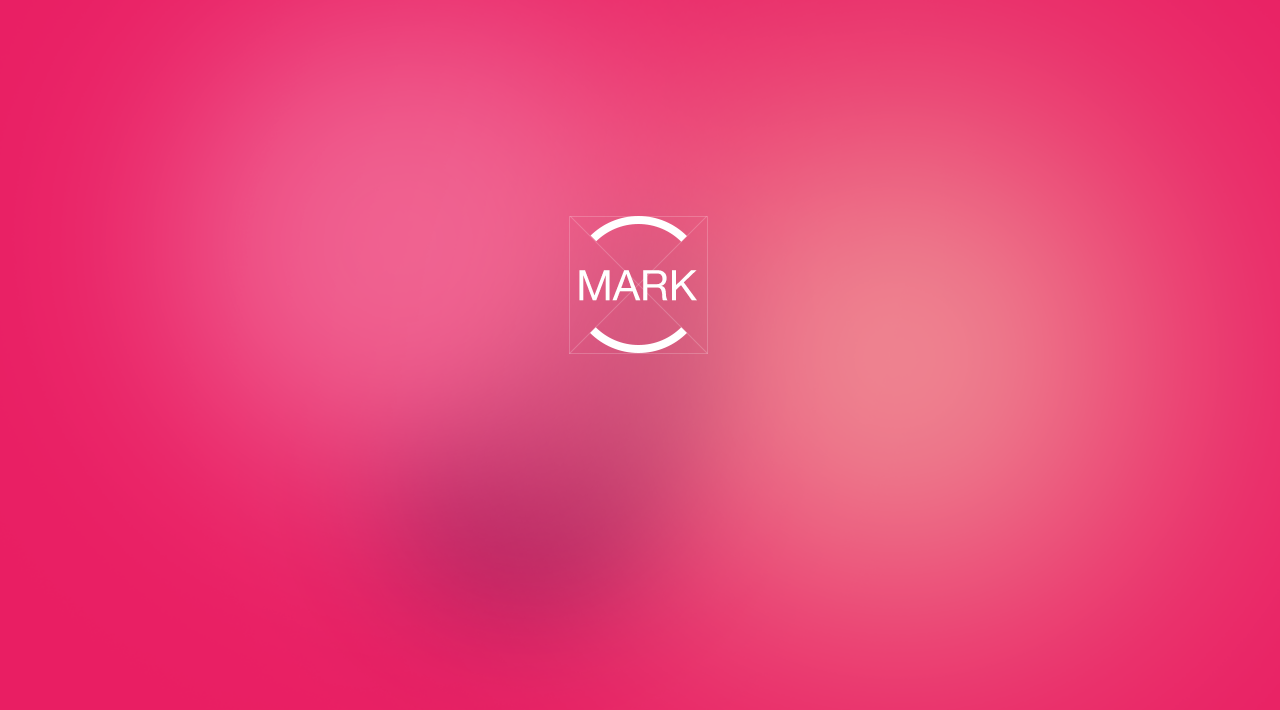
<style>
.page{position:relative;width:1280px;height:710px}
.page>*{position:absolute;margin:0}
.t1{font:42px "HelveticaNeue";color:#ffffff;font-variant:small-caps}
</style>
<div class="page">
<p class="t1" style="left:579px;top:270px;width:118px;height:31px">MARK</p>
</div>
